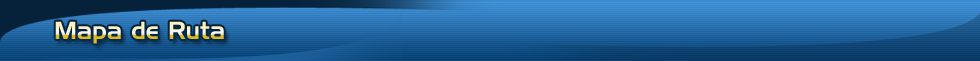
<style>
.page{position:relative;width:980px;height:61px}
.page>*{position:absolute;margin:0}
.t1{font:24px "HandelGothicBT-Regular"}
</style>
<div class="page">
<p class="t1" style="left:55px;top:21px;width:169px;height:23px">Mapa de Ruta</p>
</div>
